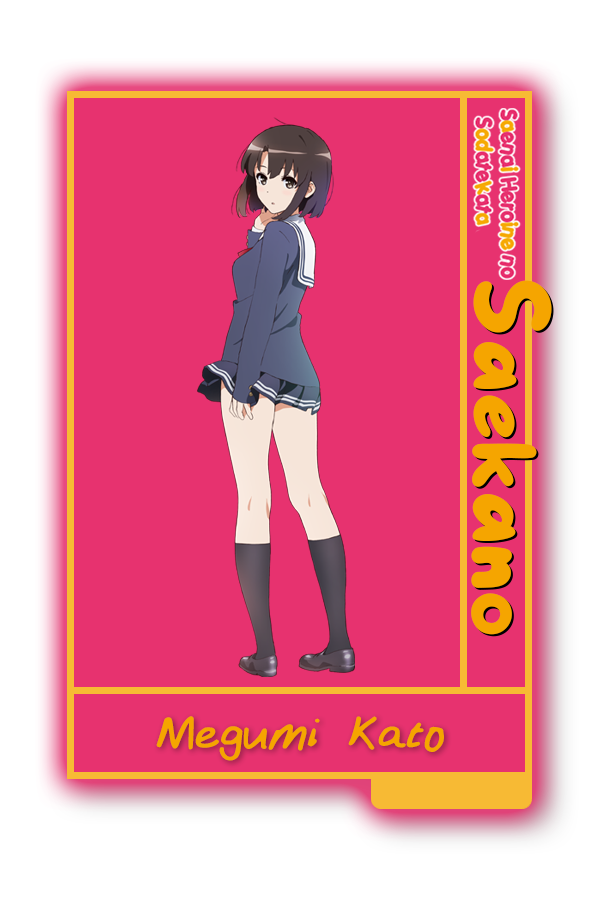
<style>
.page{position:relative;width:600px;height:900px;background:#e7326f}
.page>*{position:absolute;margin:0}
.t1{font:109.9px "Go-Mocha";color:#f5a500;scale:1.04 1}
.t2{font:56.9px "Girly_handwriting";color:#f5a500;scale:1.17 1}
</style>
<div class="page">
<p class="t1" style="left:471px;top:280px;width:81px;height:355px;rotate:91deg">Saekano</p>
<p class="t2" style="left:156px;top:716px;width:288px;height:45px">Megumi Kato</p>
</div>
